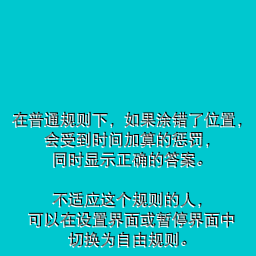
<style>
.page{position:relative;width:256px;height:256px;background:#00c8cf}
.page>*{position:absolute;margin:0}
.t1{font:16px/20px "DFPHeiW5-GB"}
</style>
<div class="page">
<p class="t1" style="left:13px;top:111px;width:229px;height:136px;text-align:center">在普通规则下，如果涂错了位置，<br>会受到时间加算的惩罚，<br>同时显示正确的答案。<br><br>不适应这个规则的人，<br>可以在设置界面或暂停界面中<br>切换为自由规则。</p>
</div>
